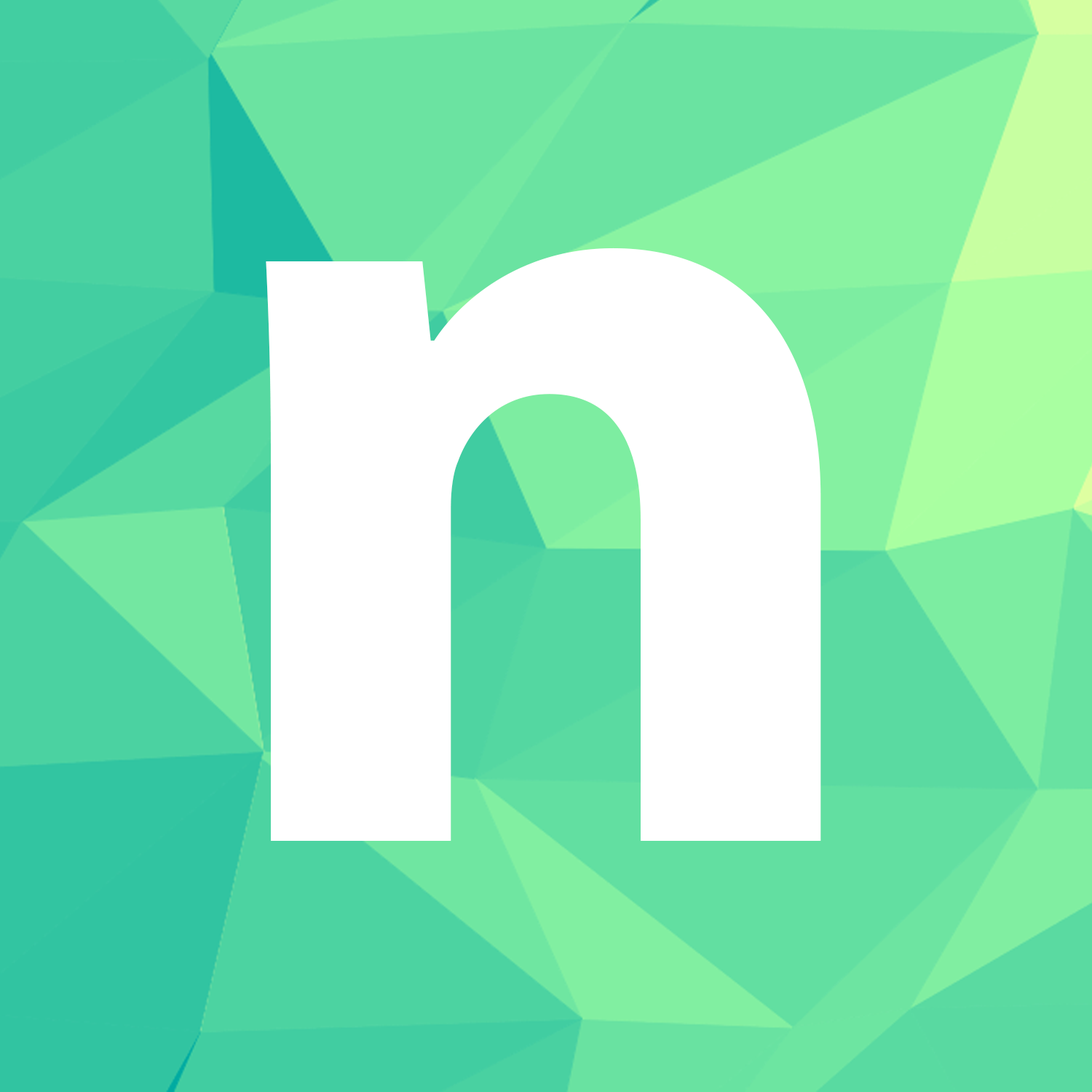
<style>
.page{position:relative;width:1092px;height:1092px}
.page>*{position:absolute;margin:0}
.t1{font:1184.7px "MyriadPro-Bold";letter-spacing:-0.075em;color:#ffffff}
</style>
<div class="page">
<p class="t1" style="left:266px;top:248px;width:555px;height:593px">n</p>
</div>
